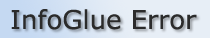
<style>
.page{position:relative;width:210px;height:38px;background:#e7eef6}
.page>*{position:absolute;margin:0}
.t1{font:26px "Verdana";color:#2b2b2b}
</style>
<div class="page">
<p class="t1" style="left:11px;top:9px;width:186px;height:21px">InfoGlue Error</p>
</div>
